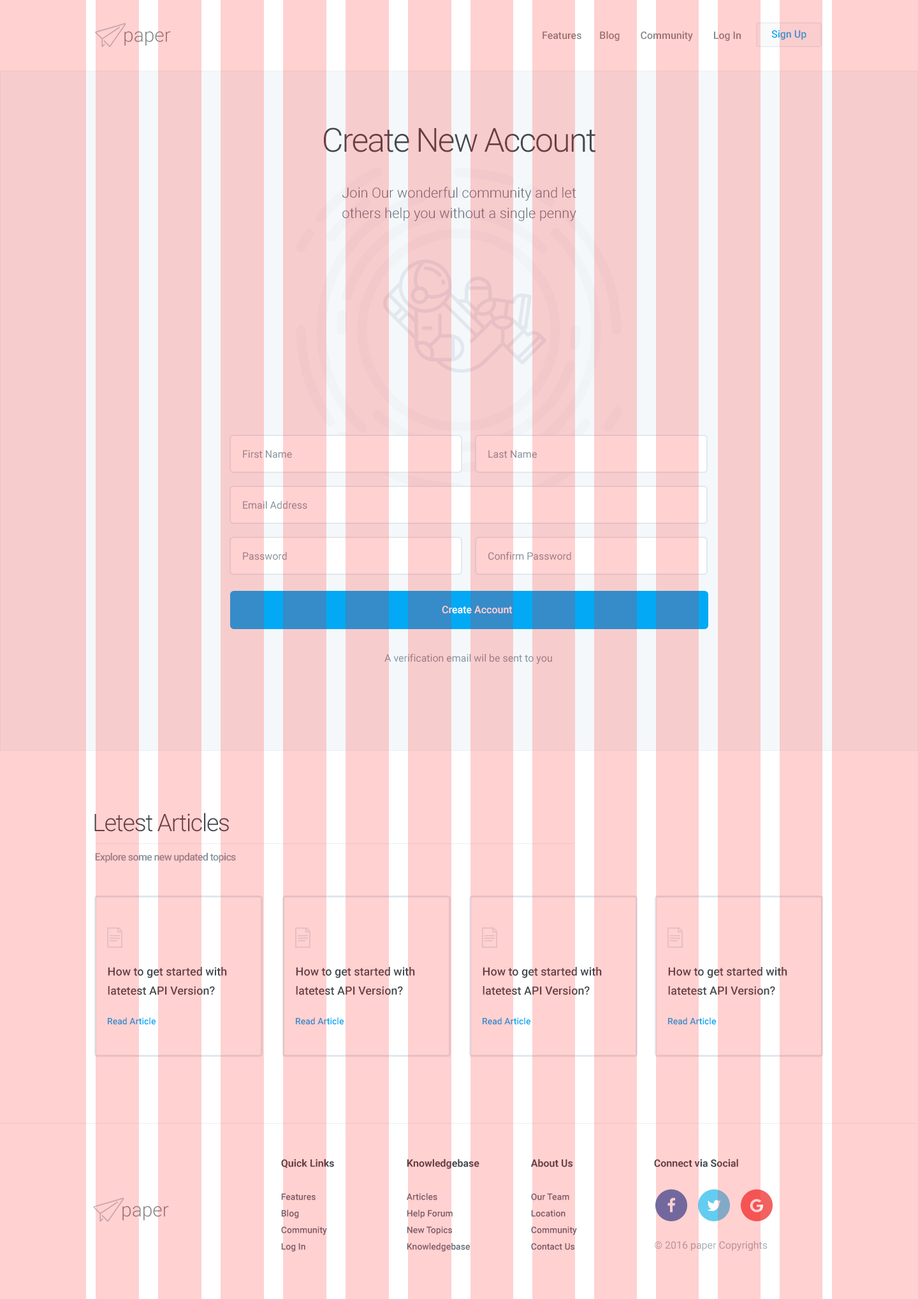
<style>
.page{position:relative;width:918px;height:1299px;background:#ffd1d1}
.page>*{position:absolute;margin:0}
.t1{font:10.2px "Roboto-Medium";color:#358cc8}
.t2{font:19.1px "Roboto-Light";color:#868686}
.t3{font:10.2px "Roboto-Medium";color:#868686}
.t4{font:33.1px "Roboto-Light";letter-spacing:-0.04em}
.t5{font:14px/20.4px "Roboto-Light"}
.t6{font:10.2px "Roboto-Regular"}
.t7{font:10.2px "Roboto-Regular";color:#9e7b84}
.t8{font:10.2px "Roboto-Medium"}
.t9{font:24.2px "Roboto-Light";letter-spacing:-0.04em}
.t10{font:10.2px "Roboto-Medium";letter-spacing:-0.04em;color:#9e7b84}
.t11{font:11.5px/19.1px "Roboto-Medium";color:#693f43}
.t12{font:11.5px/19.1px "Roboto-Medium"}
.t13{font:8.9px "Roboto-Medium"}
.t14{font:8.9px/16.6px "Roboto-Medium"}
.t15{font:10.2px/16.6px "Roboto-Bold"}
.t16{font:10.2px "Roboto-Bold";color:#693f43}
.t17{font:10.2px "Roboto-Regular";color:#bb9196}
</style>
<div class="page">
<p class="t1" style="left:771px;top:30px;width:35px;height:10px">Sign Up</p>
<p class="t2" style="left:124px;top:31px;width:47px;height:15px">paper</p>
<p class="t3" style="left:542px;top:31px;width:199px;height:10px">Features       Blog        Community        Log In</p>
<p class="t4" style="left:324px;top:127px;width:272px;height:25px">Create New Account</p>
<p class="t5" style="left:342px;top:187px;width:234px;height:34px;text-align:center">Join Our wonderful community and let others help you without a single penny</p>
<p class="t6" style="left:243px;top:450px;width:49px;height:8px">First Name</p>
<p class="t6" style="left:488px;top:450px;width:49px;height:8px">Last Name</p>
<p class="t7" style="left:243px;top:501px;width:64px;height:8px">Email Address</p>
<p class="t6" style="left:243px;top:552px;width:44px;height:8px">Password</p>
<p class="t7" style="left:488px;top:551px;width:83px;height:9px">Confirm Password</p>
<p class="t8" style="left:442px;top:606px;width:70px;height:8px">Create Account</p>
<p class="t6" style="left:384px;top:653px;width:168px;height:11px">A verification email wil be sent to you</p>
<p class="t9" style="left:94px;top:813px;width:135px;height:19px">Letest Articles</p>
<p class="t10" style="left:95px;top:853px;width:141px;height:10px">Explore some new updated topics</p>
<p class="t11" style="left:108px;top:967px;width:119px;height:28px">How to get started with latetest API Version?</p>
<p class="t12" style="left:296px;top:967px;width:119px;height:28px">How to get started with latetest API Version?</p>
<p class="t12" style="left:483px;top:967px;width:119px;height:28px">How to get started with latetest API Version?</p>
<p class="t12" style="left:668px;top:967px;width:119px;height:28px">How to get started with latetest API Version?</p>
<p class="t13" style="left:108px;top:1017px;width:48px;height:8px">Read Article</p>
<p class="t13" style="left:296px;top:1017px;width:48px;height:8px">Read Article</p>
<p class="t13" style="left:483px;top:1017px;width:47px;height:8px">Read Article</p>
<p class="t13" style="left:668px;top:1017px;width:48px;height:8px">Read Article</p>
<p class="t14" style="left:281px;top:1159px;width:53px;height:93px"><span class="t15">Quick Links<br><br></span>Features        <br>Blog<br>Community           <br>Log In</p>
<p class="t14" style="left:406px;top:1159px;width:73px;height:93px"><span class="t15">Knowledgebase<br><br></span>Articles        <br>Help Forum<br>New Topics <br>Knowledgebase</p>
<p class="t14" style="left:530px;top:1159px;width:47px;height:91px"><span class="t15">About Us<br><br></span>Our Team      <br>Location<br>Community           <br>Contact Us</p>
<p class="t16" style="left:654px;top:1159px;width:84px;height:8px">Connect via Social</p>
<p class="t2" style="left:122px;top:1206px;width:47px;height:15px">paper</p>
<p class="t17" style="left:655px;top:1241px;width:112px;height:10px">© 2016 paper Copyrights</p>
</div>
